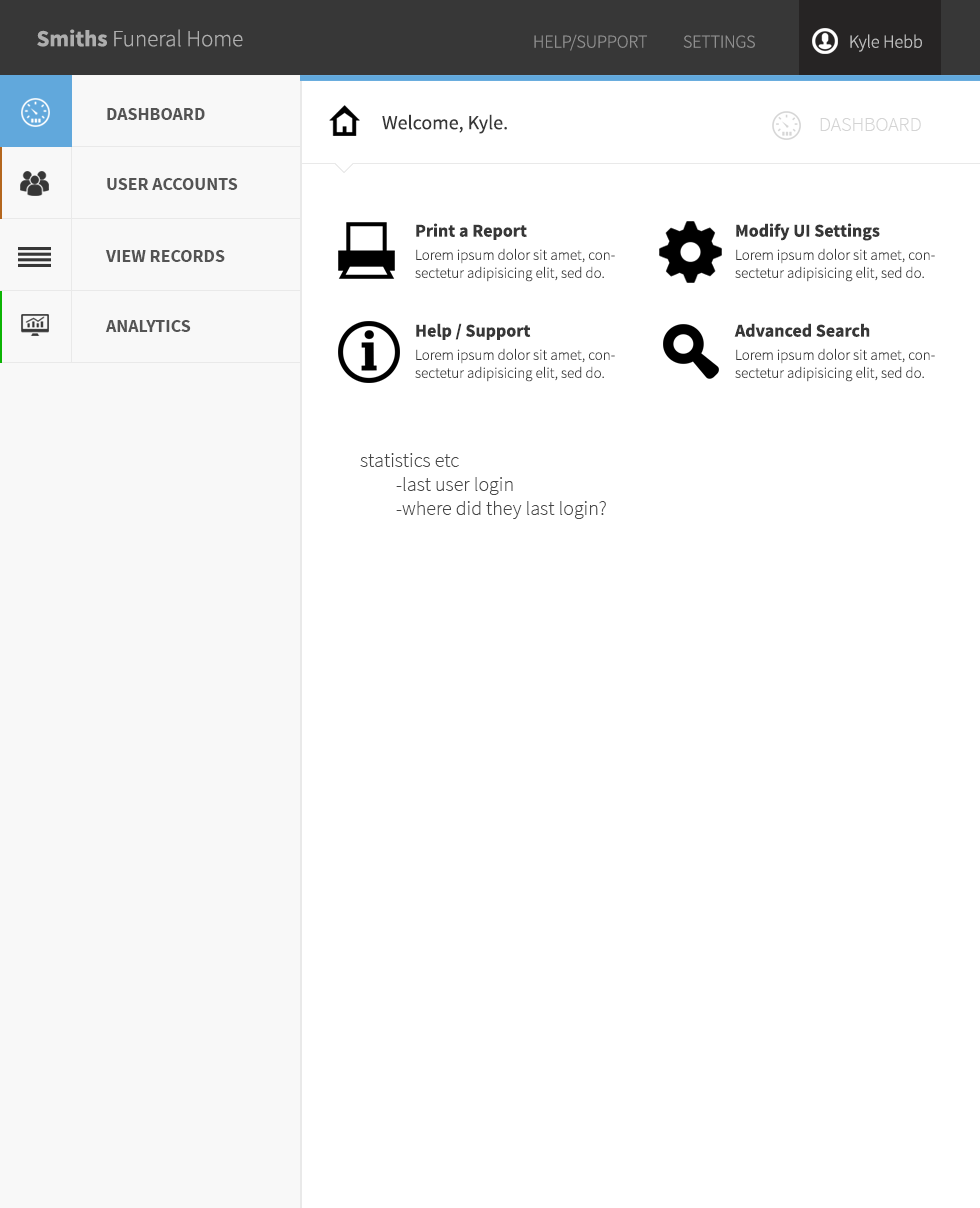
<style>
.page{position:relative;width:980px;height:1208px;background:#ffffff}
.page>*{position:absolute;margin:0}
.t1{font:23px "SourceSansPro-Light";color:#aeaeae}
.t2{font:23px "SourceSansPro-Bold";color:#aeaeae}
.t3{font:18px "SourceSansPro-Light";color:#8f8f8f}
.t4{font:18px "SourceSansPro-Light";color:#c0c0c0}
.t5{font:18px "SourceSansPro-Bold";color:#545454}
.t6{font:20px "SourceSansPro-Regular";color:#373737}
.t7{font:20px "SourceSansPro-Light";color:#d4d4d4}
.t8{font:18px "SourceSansPro-Bold";color:#373737}
.t9{font:15px "SourceSansPro-Light";color:#373737}
.t10{font:20px "SourceSansPro-Light";color:#464646}
</style>
<div class="page">
<p class="t1" style="left:37px;top:29px;width:206px;height:18px"><span class="t2">Smiths </span>Funeral Home</p>
<p class="t3" style="left:534px;top:34px;width:113px;height:17px">HELP/SUPPORT</p>
<p class="t3" style="left:683px;top:35px;width:72px;height:13px">SETTINGS</p>
<p class="t4" style="left:850px;top:34px;width:72px;height:18px">Kyle Hebb</p>
<p class="t5" style="left:107px;top:108px;width:98px;height:12px">DASHBOARD</p>
<p class="t6" style="left:382px;top:114px;width:125px;height:20px">Welcome, Kyle.</p>
<p class="t7" style="left:820px;top:118px;width:101px;height:13px">DASHBOARD</p>
<p class="t5" style="left:107px;top:178px;width:131px;height:12px">USER ACCOUNTS</p>
<p class="t8" style="left:416px;top:223px;width:111px;height:17px">Print a Report</p>
<p class="t8" style="left:736px;top:223px;width:144px;height:18px">Modify UI Settings</p>
<p class="t5" style="left:105px;top:250px;width:120px;height:12px">VIEW RECORDS</p>
<p class="t9" style="left:415px;top:248px;width:200px;height:34px">Lorem ipsum dolor sit amet, consectetur adipisicing elit, sed do.</p>
<p class="t9" style="left:735px;top:248px;width:200px;height:34px">Lorem ipsum dolor sit amet, consectetur adipisicing elit, sed do.</p>
<p class="t5" style="left:105px;top:320px;width:86px;height:12px">ANALYTICS</p>
<p class="t8" style="left:416px;top:323px;width:115px;height:17px">Help / Support</p>
<p class="t8" style="left:734px;top:323px;width:136px;height:14px">Advanced Search</p>
<p class="t9" style="left:415px;top:348px;width:200px;height:34px">Lorem ipsum dolor sit amet, consectetur adipisicing elit, sed do.</p>
<p class="t9" style="left:735px;top:348px;width:200px;height:34px">Lorem ipsum dolor sit amet, consectetur adipisicing elit, sed do.</p>
<p class="t10" style="left:360px;top:453px;width:246px;height:66px">statistics etc<br> -last user login<br> -where did they last login?</p>
</div>
